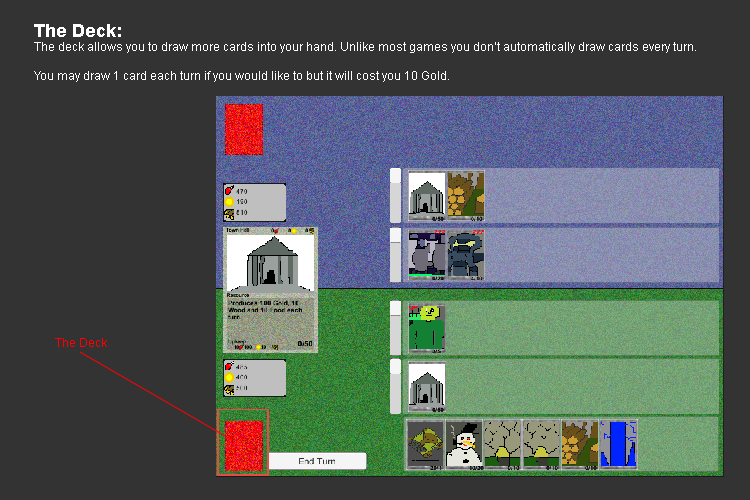
<style>
.page{position:relative;width:750px;height:500px;background:#333333}
.page>*{position:absolute;margin:0}
.t1{font:12px "ArialMT";color:#ffffff}
.t2{font:18px "Arial-BoldMT";color:#ffffff}
.t3{font:12px "ArialMT";color:#ff0000}
</style>
<div class="page">
<p class="t1" style="left:34px;top:24px;width:662px;height:58px"><span class="t2">The Deck:<br></span>The deck allows you to draw more cards into your hand. Unlike most games you don’t automatically draw cards every turn.<br><br>You may draw 1 card each turn if you would like to but it will cost you 10 Gold.</p>
<p class="t3" style="left:55px;top:338px;width:52px;height:9px">The Deck</p>
</div>
